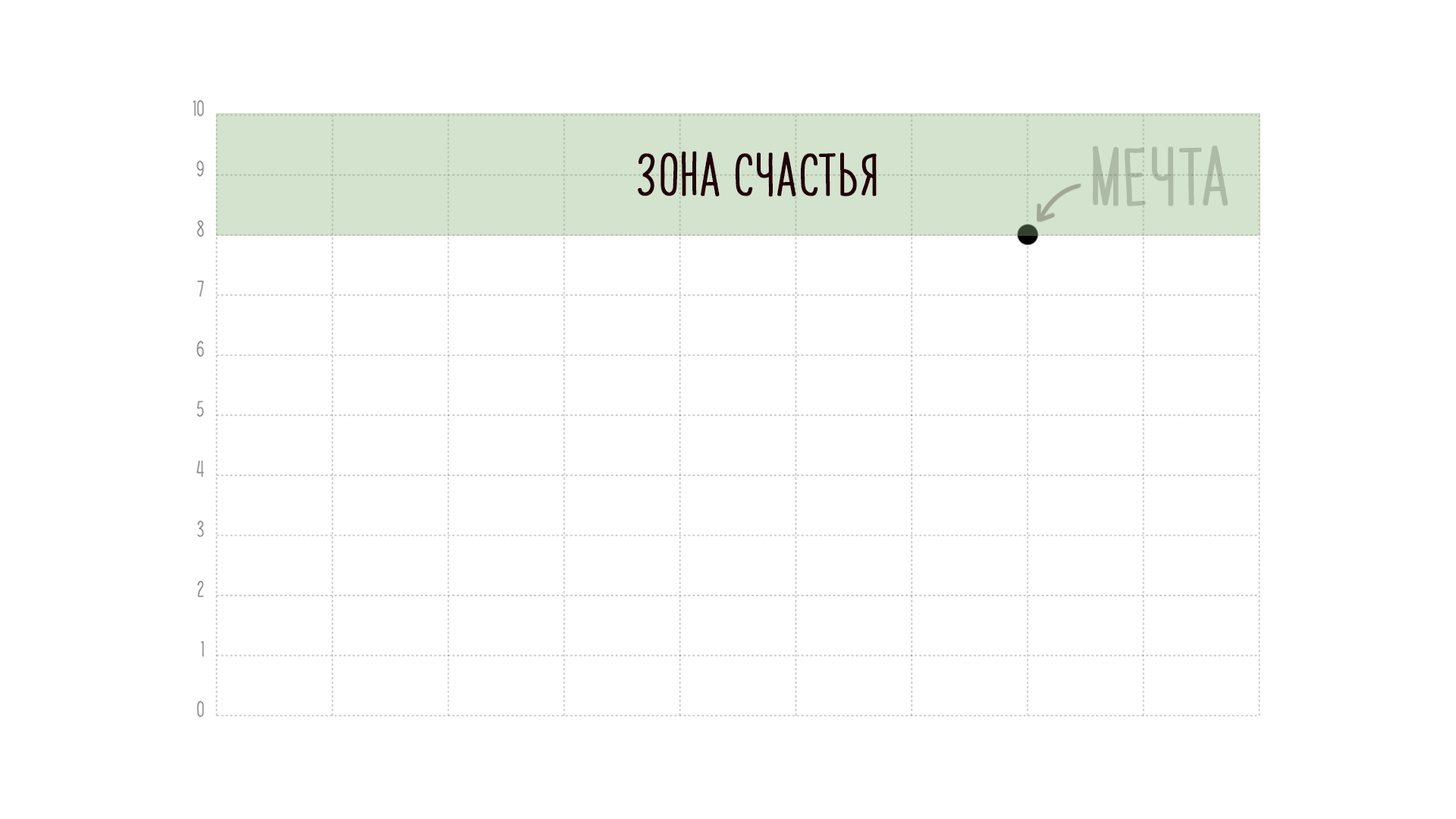
<style>
.page{position:relative;width:1456px;height:819px;background:#ffffff}
.page>*{position:absolute;margin:0}
.t1{font:49.4px "PapayaSunrise";color:#adbaa5;font-weight:bold}
.t2{font:36.4px "PapayaSunrise";color:#210008;font-weight:bold}
</style>
<div class="page">
<p class="t1" style="left:1093px;top:146px;width:135px;height:60px">мечта</p>
<p class="t2" style="left:638px;top:151px;width:239px;height:46px">зона счастья</p>
</div>
